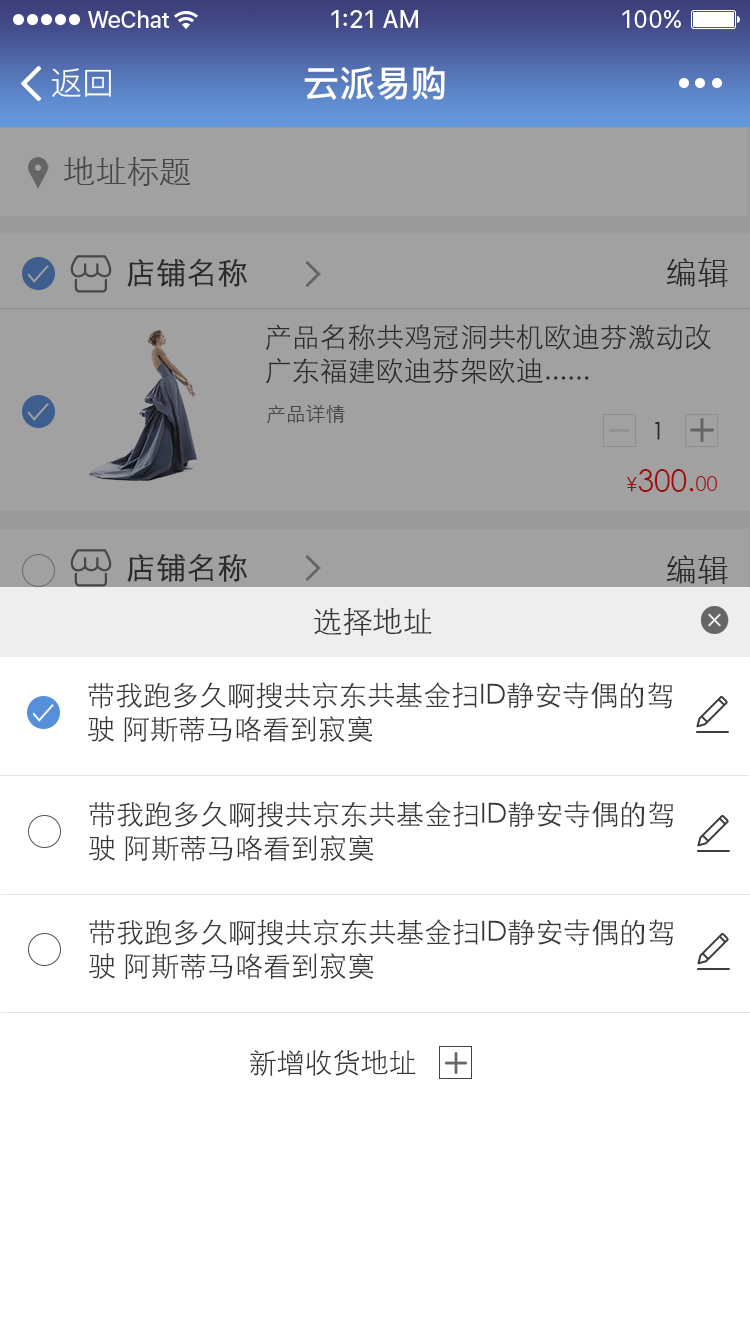
<style>
.page{position:relative;width:750px;height:1334px;background:#ffffff}
.page>*{position:absolute;margin:0}
.t1{font:32px "PingFang-SC-Regular";color:#ffffff}
.t2{font:36px "PingFang-SC-Bold";color:#ffffff}
.t3{font:32px "STXihei";color:#474747}
.t4{font:32px "STXihei";color:#373737}
.t5{font:30px "STXihei";color:#373737;font-weight:bold}
.t6{font:28px "STXihei";color:#373737}
.t7{font:20px "STXihei";color:#474747}
.t8{font:24px "STXihei";color:#373737}
.t9{font:30px "STXihei";color:#a10b0b}
.t10{font:20px "STXihei";color:#a10b0b}
.t11{font:30px "STXihei";color:#373737}
</style>
<div class="page">
<p class="t1" style="left:52px;top:68px;width:59px;height:29px">返回</p>
<p class="t2" style="left:304px;top:66px;width:141px;height:34px">云派易购</p>
<p class="t3" style="left:63px;top:156px;width:128px;height:30px">地址标题</p>
<p class="t4" style="left:666px;top:257px;width:62px;height:30px">编辑</p>
<p class="t5" style="left:127px;top:258px;width:120px;height:29px">店铺名称</p>
<p class="t6" style="left:265px;top:324px;width:446px;height:60px">产品名称共鸡冠洞共机欧迪芬激动改广东福建欧迪芬架欧迪......</p>
<p class="t7" style="left:267px;top:405px;width:78px;height:18px">产品详情</p>
<p class="t8" style="left:655px;top:422px;width:5px;height:18px">1</p>
<p class="t9" style="left:627px;top:469px;width:90px;height:23px"><span class="t10">¥</span>300.<span class="t10">00</span></p>
<p class="t5" style="left:127px;top:553px;width:120px;height:29px">店铺名称</p>
<p class="t4" style="left:666px;top:554px;width:62px;height:30px">编辑</p>
<p class="t11" style="left:314px;top:607px;width:118px;height:29px">选择地址</p>
<p class="t6" style="left:88px;top:682px;width:584px;height:61px">带我跑多久啊搜共京东共基金扫ID静安寺偶的驾驶 阿斯蒂马咯看到寂寞</p>
<p class="t6" style="left:89px;top:801px;width:584px;height:61px">带我跑多久啊搜共京东共基金扫ID静安寺偶的驾驶 阿斯蒂马咯看到寂寞</p>
<p class="t6" style="left:89px;top:919px;width:584px;height:61px">带我跑多久啊搜共京东共基金扫ID静安寺偶的驾驶 阿斯蒂马咯看到寂寞</p>
<p class="t6" style="left:250px;top:1049px;width:166px;height:27px">新增收货地址</p>
</div>
